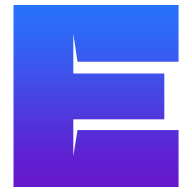
<style>
.page{position:relative;width:192px;height:192px;background:#ffffff}
.page>*{position:absolute;margin:0}
.t1{font:284.5px "BananaBrick"}
</style>
<div class="page">
<p class="t1" style="left:13px;top:5px;width:166px;height:182px">E</p>
</div>
